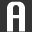
<style>
.page{position:relative;width:32px;height:32px;background:#333333}
.page>*{position:absolute;margin:0}
.t1{font:39.6px "Silom";color:#ffffff;scale:0.91 1}
</style>
<div class="page">
<p class="t1" style="left:7px;top:1px;width:18px;height:31px">A</p>
</div>
